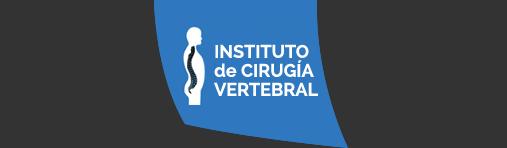
<style>
.page{position:relative;width:507px;height:148px;background:#333333}
.page>*{position:absolute;margin:0}
.t1{font:18px "Raleway-Bold";color:#ffffff}
</style>
<div class="page">
<p class="t1" style="left:215px;top:44px;width:94px;height:14px">INSTITUTO</p>
<p class="t1" style="left:214px;top:60px;width:100px;height:17px">de CIRUGÍA</p>
<p class="t1" style="left:214px;top:82px;width:104px;height:14px">VERTEBRAL</p>
</div>
